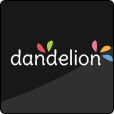
<style>
.page{position:relative;width:114px;height:114px;background:#181818}
.page>*{position:absolute;margin:0}
.t1{font:20.6px "Delius-Regular";color:#ffffff}
</style>
<div class="page">
<p class="t1" style="left:10px;top:49px;width:91px;height:17px">dandelion</p>
</div>
